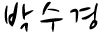
<style>
.page{position:relative;width:105px;height:34px;background:#ffffff}
.page>*{position:absolute;margin:0}
.t1{font:41.5px "NanumBrush";letter-spacing:0.15em;color:#000000;text-transform:uppercase}
</style>
<div class="page">
<p class="t1" style="left:4px;top:1px;width:94px;height:31px">박수경</p>
</div>
